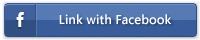
<style>
.page{position:relative;width:200px;height:40px;background:#395d9b}
.page>*{position:absolute;margin:0}
.t1{font:13px "SegoeUI-SemiBold";color:#ffffff}
</style>
<div class="page">
<p class="t1" style="left:59px;top:14px;width:113px;height:11px">Link with Facebook</p>
</div>
